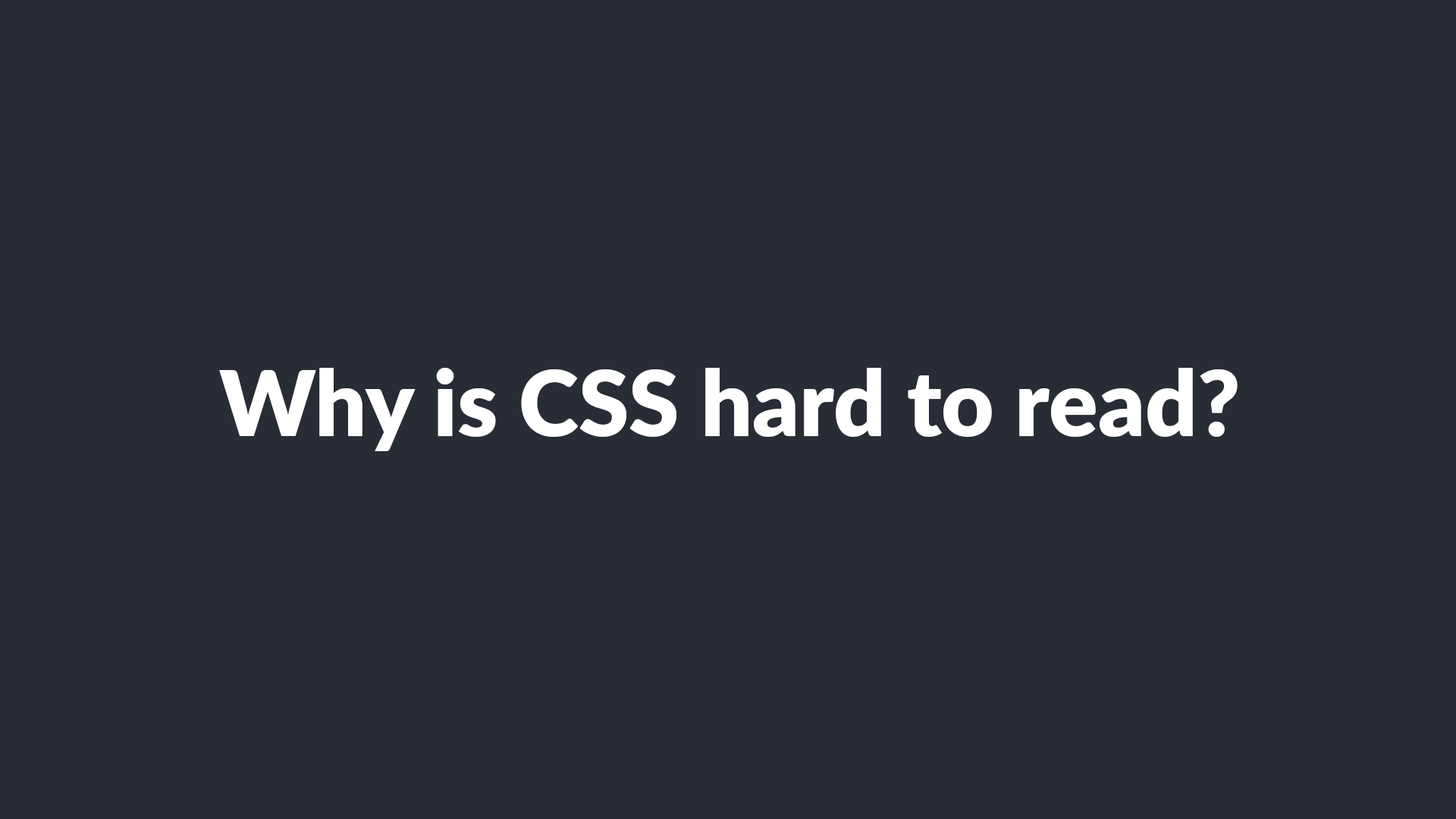
<style>
.page{position:relative;width:1456px;height:819px;background:#282c35}
.page>*{position:absolute;margin:0}
.t1{font:91px "Lato-ExtraBold";color:#ffffff}
</style>
<div class="page">
<p class="t1" style="left:219px;top:368px;width:1019px;height:83px">Why is CSS hard to read?</p>
</div>
